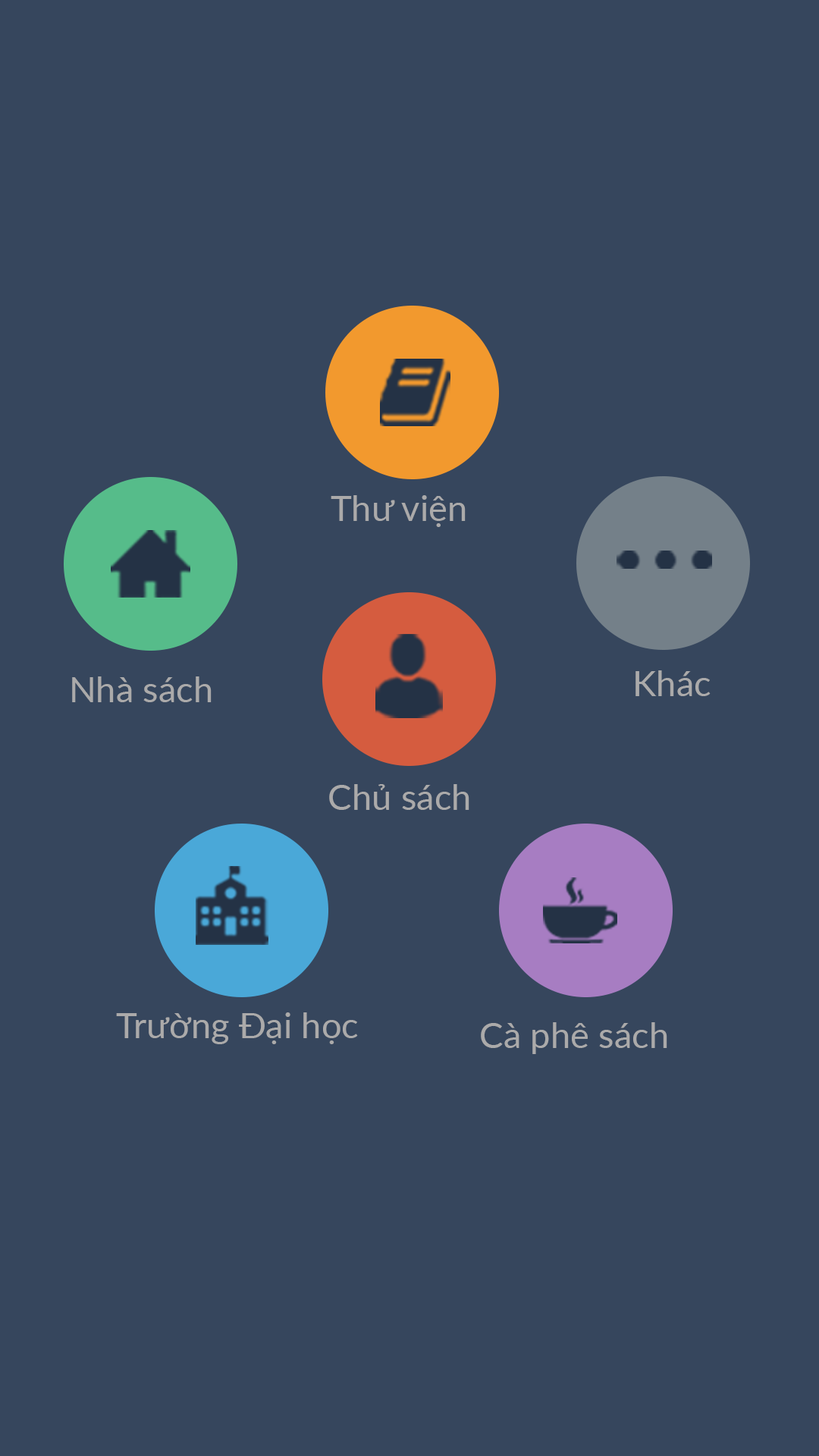
<style>
.page{position:relative;width:819px;height:1456px;background:#36465d}
.page>*{position:absolute;margin:0}
.t1{font:35.8px "Lato-Regular";color:#abaaaa}
</style>
<div class="page">
<p class="t1" style="left:331px;top:495px;width:135px;height:32px">Thư viện</p>
<p class="t1" style="left:72px;top:676px;width:140px;height:26px">Nhà sách</p>
<p class="t1" style="left:635px;top:670px;width:76px;height:26px">Khác</p>
<p class="t1" style="left:329px;top:784px;width:140px;height:26px">Chủ sách</p>
<p class="t1" style="left:116px;top:1012px;width:242px;height:32px">Trường Đại học</p>
<p class="t1" style="left:481px;top:1022px;width:186px;height:32px">Cà phê sách</p>
</div>
